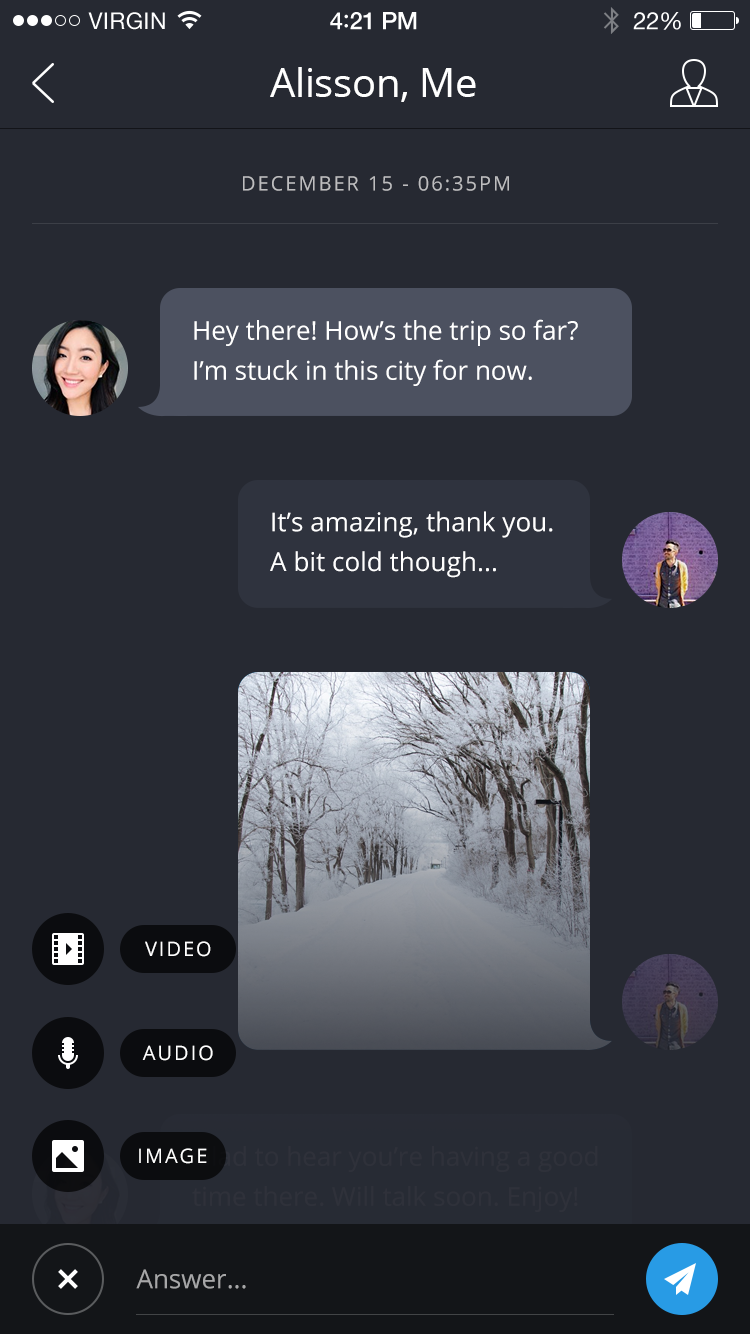
<style>
.page{position:relative;width:750px;height:1334px;background:#262932}
.page>*{position:absolute;margin:0}
.t1{font:40px "OpenSans";letter-spacing:-0.01em;color:#ffffff}
.t2{font:20px "OpenSans";letter-spacing:0.1em;color:#bdbdbf;text-transform:uppercase}
.t3{font:26px/40px "OpenSans";color:#ffffff}
.t4{font:26px/39.8px "OpenSans";color:#ffffff}
.t5{font:20px "OpenSans";letter-spacing:0.1em;color:#ffffff;text-transform:uppercase}
.t6{font:26px "OpenSans";color:#a7a7a8}
</style>
<div class="page">
<p class="t1" style="left:270px;top:67px;width:206px;height:35px">Alisson, Me</p>
<p class="t2" style="left:243px;top:176px;width:266px;height:15px">december 15 - 06:35PM</p>
<p class="t3" style="left:194px;top:319px;width:384px;height:67px">Hey there! How’s the trip so far? I’m stuck in this city for now.</p>
<p class="t4" style="left:270px;top:511px;width:283px;height:67px">It’s amazing, thank you. A bit cold though...</p>
<p class="t5" style="left:145px;top:941px;width:66px;height:16px">video</p>
<p class="t5" style="left:142px;top:1045px;width:71px;height:16px">audio</p>
<p class="t5" style="left:139px;top:1148px;width:68px;height:16px">image</p>
<p class="t6" style="left:136px;top:1269px;width:110px;height:20px">Answer...</p>
</div>
